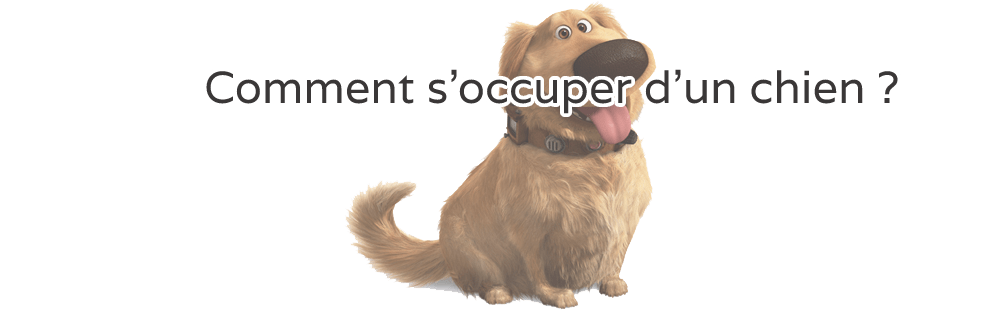
<style>
.page{position:relative;width:1000px;height:310px;background:#ffffff}
.page>*{position:absolute;margin:0}
.t1{font:45px "Varela";color:#3a3737}
</style>
<div class="page">
<p class="t1" style="left:206px;top:69px;width:692px;height:45px">Comment s'occuper d'un chien ?</p>
</div>
